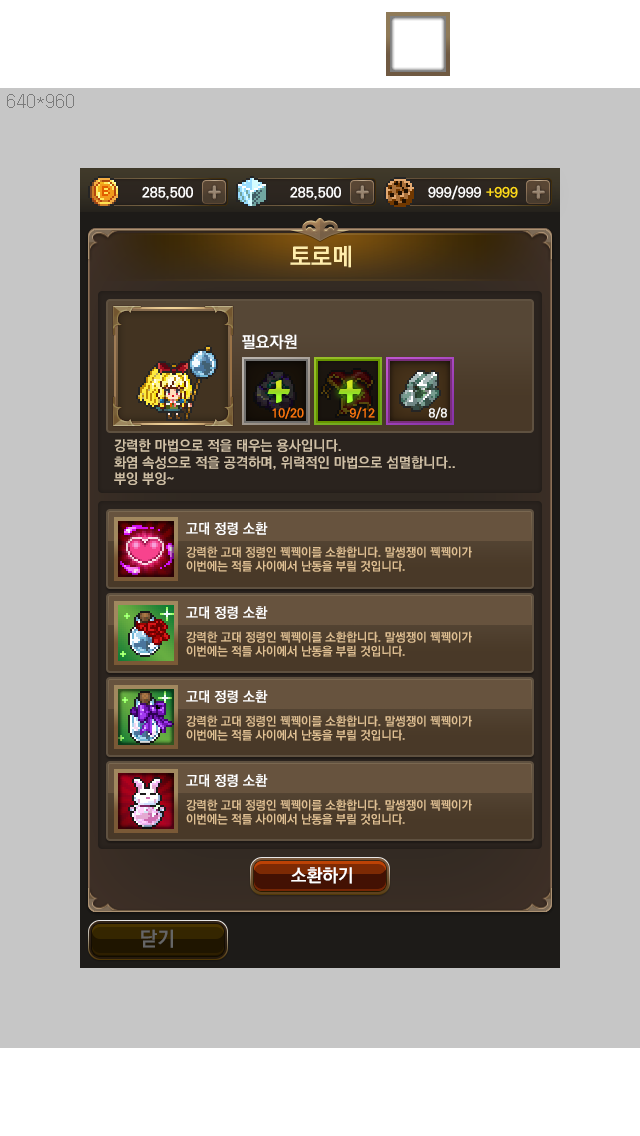
<style>
.page{position:relative;width:640px;height:1136px;background:#c6c6c6}
.page>*{position:absolute;margin:0}
.t1{font:24px "KoPubDotumBold";color:#ffedab}
.t2{font:16px "KoPubDotumBold";color:#ffffff}
.t3{font:48px "CooperBlack";scale:0.96 1}
.t4{font:12px "KoPubDotumBold";color:#fe770d}
.t5{font:12px "KoPubDotumBold";color:#ffffff}
.t6{font:14px "KoPubDotumBold";color:#d0c0a6}
.t7{font:14px "KoPubDotumBold";color:#ffffff}
.t8{font:12px "KoPubDotumBold";color:#e0c093}
.t9{font:18px "KoPubDotumBold";color:#ffffff}
.t10{font:20px "KoPubDotumBold";color:#666666}
</style>
<div class="page">
<p class="t1" style="left:290px;top:245px;width:61px;height:23px">토로메</p>
<p class="t2" style="left:242px;top:334px;width:55px;height:16px">필요자원</p>
<p class="t3" style="left:267px;top:380px;width:23px;height:23px">+</p>
<p class="t3" style="left:338px;top:380px;width:23px;height:23px">+</p>
<p class="t3" style="left:338px;top:380px;width:23px;height:23px">+</p>
<p class="t4" style="left:272px;top:407px;width:32px;height:12px">10/20</p>
<p class="t4" style="left:350px;top:407px;width:25px;height:12px">9/12</p>
<p class="t5" style="left:428px;top:407px;width:19px;height:12px">8/8</p>
<p class="t6" style="left:114px;top:439px;width:341px;height:46px">강력한 마법으로 적을 태우는 용사입니다. <br>화염 속성으로 적을 공격하며, 위력적인 마법으로 섬멸합니다..<br>뿌잉 뿌잉~</p>
<p class="t7" style="left:186px;top:522px;width:82px;height:13px">고대 정령 소환</p>
<p class="t8" style="left:186px;top:546px;width:286px;height:26px">강력한 고대 정령인 꿱꿱이를 소환합니다. 말썽쟁이 꿱꿱이가 <br>이번에는 적들 사이에서 난동을 부릴 것입니다.</p>
<p class="t7" style="left:186px;top:606px;width:82px;height:13px">고대 정령 소환</p>
<p class="t8" style="left:186px;top:631px;width:286px;height:26px">강력한 고대 정령인 꿱꿱이를 소환합니다. 말썽쟁이 꿱꿱이가 <br>이번에는 적들 사이에서 난동을 부릴 것입니다.</p>
<p class="t7" style="left:186px;top:690px;width:82px;height:13px">고대 정령 소환</p>
<p class="t8" style="left:186px;top:715px;width:286px;height:26px">강력한 고대 정령인 꿱꿱이를 소환합니다. 말썽쟁이 꿱꿱이가 <br>이번에는 적들 사이에서 난동을 부릴 것입니다.</p>
<p class="t7" style="left:186px;top:774px;width:82px;height:13px">고대 정령 소환</p>
<p class="t8" style="left:186px;top:799px;width:286px;height:26px">강력한 고대 정령인 꿱꿱이를 소환합니다. 말썽쟁이 꿱꿱이가 <br>이번에는 적들 사이에서 난동을 부릴 것입니다.</p>
<p class="t9" style="left:291px;top:867px;width:61px;height:17px">소환하기</p>
<p class="t10" style="left:141px;top:929px;width:32px;height:19px">닫기</p>
</div>
